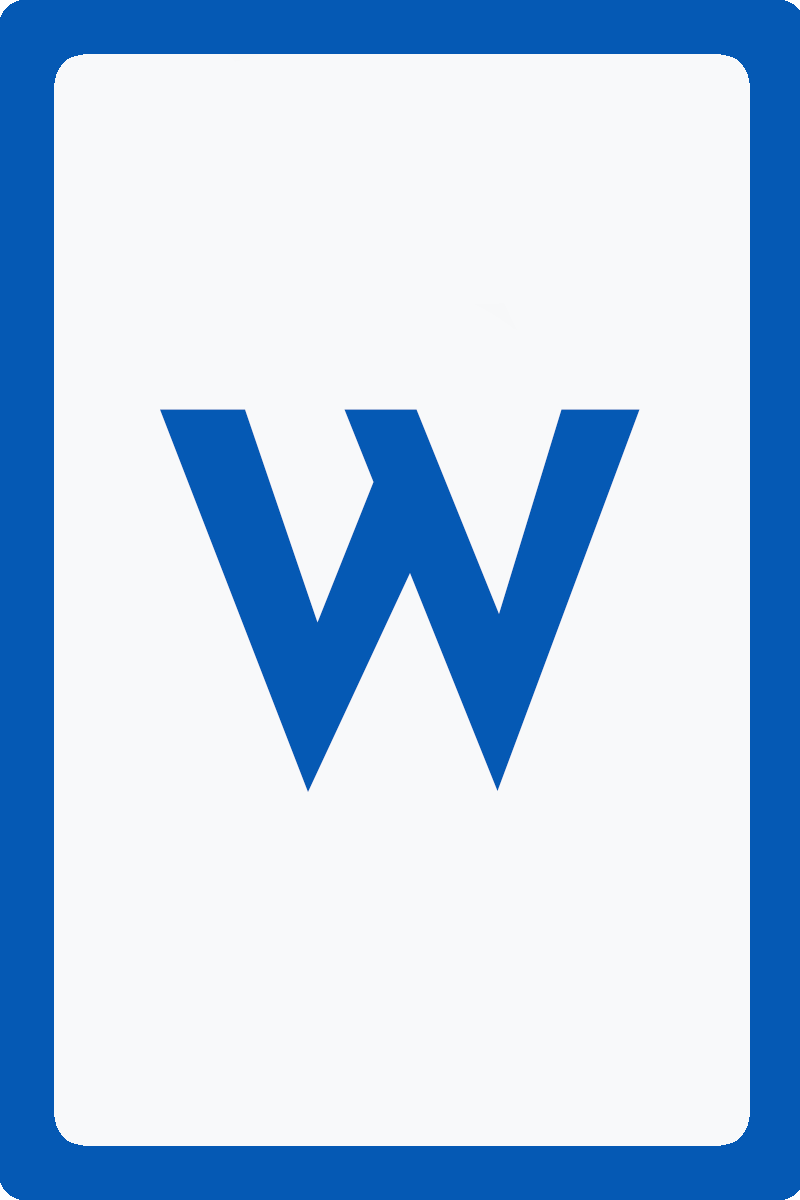
<style>
.page{position:relative;width:800px;height:1200px;background:#f8f9fa}
.page>*{position:absolute;margin:0}
.t1{font:500px "JosefinSans-Bold";color:#0559b4}
</style>
<div class="page">
<p class="t1" style="left:160px;top:409px;width:480px;height:383px">W</p>
</div>
